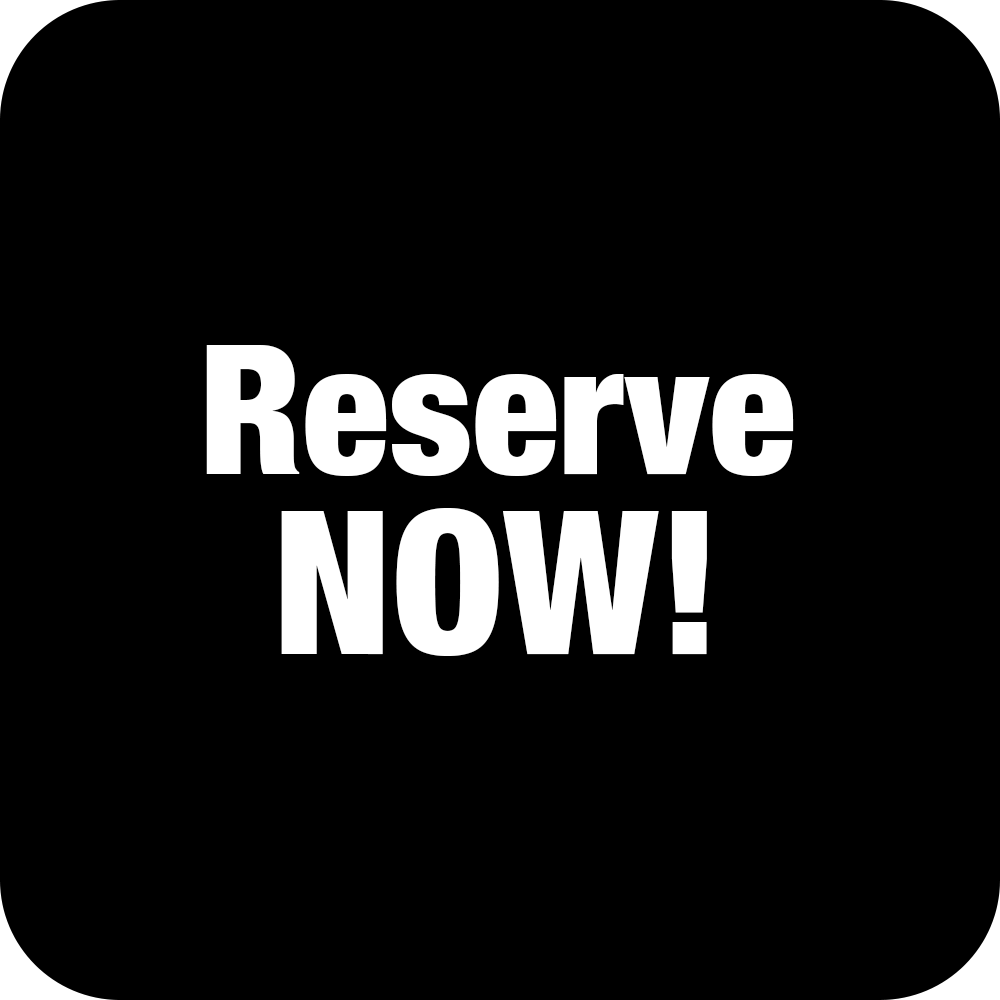
<style>
.page{position:relative;width:1000px;height:1000px;background:#000000}
.page>*{position:absolute;margin:0}
.t1{font:180px/180px "HelveticaNeue-CondensedBlack";color:#ffffff}
.t2{font:200px/180px "HelveticaNeue-CondensedBlack";color:#ffffff}
</style>
<div class="page">
<p class="t1" style="left:206px;top:345px;width:588px;height:311px;text-align:center">Reserve<br><span class="t2">NOW!</span></p>
</div>
